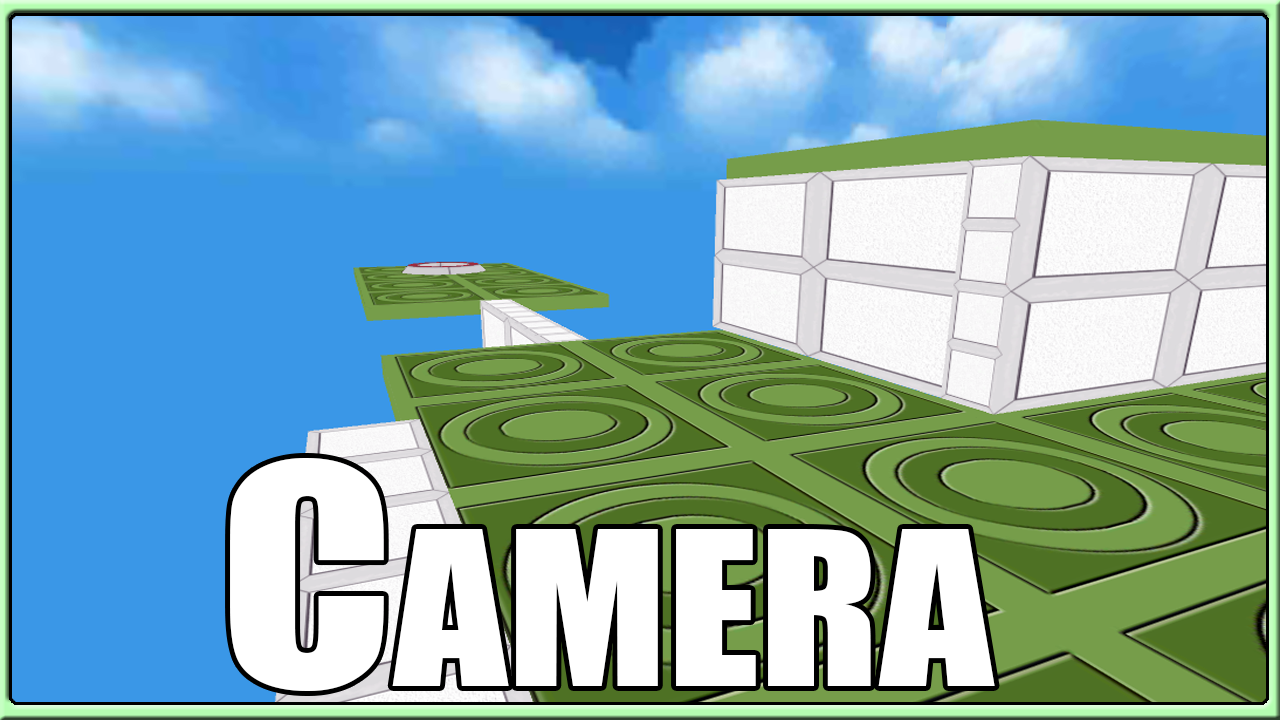
<style>
.page{position:relative;width:1280px;height:720px;background:#3a97e7}
.page>*{position:absolute;margin:0}
.t1{font:199.4px "Impact";color:#ffffff;scale:1.12 1}
.t2{font:282.3px "Impact";color:#ffffff;scale:1.12 1}
</style>
<div class="page">
<p class="t1" style="left:230px;top:458px;width:765px;height:233px"><span class="t2">C</span>AMERA</p>
</div>
